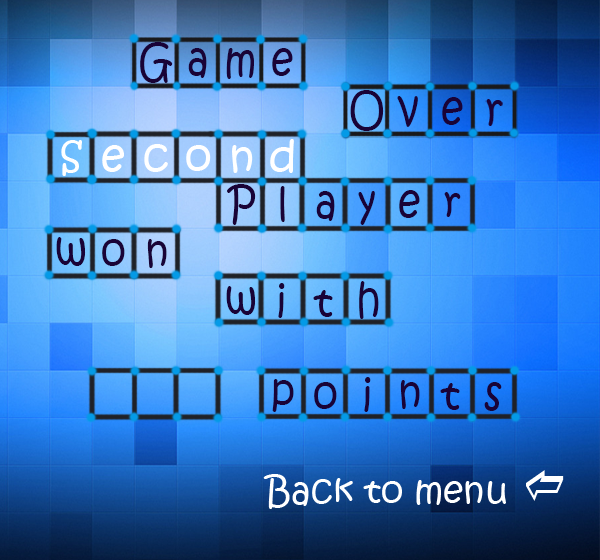
<style>
.page{position:relative;width:600px;height:560px}
.page>*{position:absolute;margin:0}
.t1{font:44.8px "KristenITC-Regular";color:#190337;scale:0.89 1}
</style>
<div class="page">
<p class="t1" style="left:140px;top:42px;width:33px;height:41px">G</p>
<p class="t1" style="left:188px;top:48px;width:19px;height:30px">a</p>
<p class="t1" style="left:226px;top:48px;width:28px;height:31px">m</p>
<p class="t1" style="left:272px;top:48px;width:21px;height:28px">e</p>
<p class="t1" style="left:350px;top:90px;width:34px;height:41px">O</p>
<p class="t1" style="left:397px;top:96px;width:21px;height:31px">v</p>
<p class="t1" style="left:442px;top:97px;width:21px;height:28px">e</p>
<p class="t1" style="left:227px;top:184px;width:29px;height:41px">P</p>
<p class="t1" style="left:280px;top:186px;width:5px;height:36px">l</p>
<p class="t1" style="left:316px;top:191px;width:19px;height:30px">a</p>
<p class="t1" style="left:358px;top:191px;width:17px;height:34px">y</p>
<p class="t1" style="left:399px;top:190px;width:21px;height:28px">e</p>
<p class="t1" style="left:444px;top:192px;width:17px;height:25px">r</p>
<p class="t1" style="left:56px;top:237px;width:30px;height:29px">w</p>
<p class="t1" style="left:102px;top:239px;width:23px;height:27px">o</p>
<p class="t1" style="left:147px;top:239px;width:20px;height:29px">n</p>
<p class="t1" style="left:359px;top:281px;width:20px;height:38px">h</p>
<p class="t1" style="left:226px;top:286px;width:30px;height:29px">w</p>
<p class="t1" style="left:278px;top:283px;width:55px;height:35px">i    t</p>
<p class="t1" style="left:364px;top:377px;width:7px;height:35px">i</p>
<p class="t1" style="left:272px;top:379px;width:22px;height:33px">p</p>
<p class="t1" style="left:314px;top:382px;width:23px;height:27px">o</p>
<p class="t1" style="left:400px;top:380px;width:20px;height:29px">n</p>
<p class="t1" style="left:440px;top:383px;width:20px;height:27px">t</p>
<p class="t1" style="left:484px;top:382px;width:18px;height:29px">s</p>
</div>
